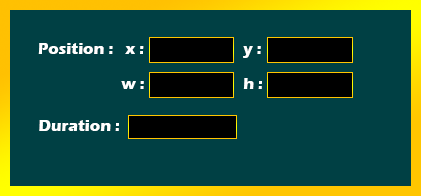
<style>
.page{position:relative;width:421px;height:196px;background:#004044}
.page>*{position:absolute;margin:0}
.t1{font:16px "ErasITC-Bold";color:#ffffff}
</style>
<div class="page">
<p class="t1" style="left:38px;top:43px;width:75px;height:11px">Position :</p>
<p class="t1" style="left:125px;top:46px;width:19px;height:8px">x :</p>
<p class="t1" style="left:243px;top:46px;width:18px;height:12px">y :</p>
<p class="t1" style="left:243px;top:78px;width:19px;height:11px">h :</p>
<p class="t1" style="left:121px;top:81px;width:23px;height:8px">w :</p>
<p class="t1" style="left:39px;top:120px;width:80px;height:11px">Duration :</p>
</div>
